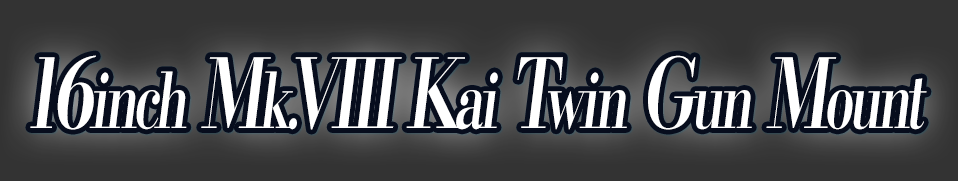
<style>
.page{position:relative;width:958px;height:181px;background:#333333}
.page>*{position:absolute;margin:0}
.t1{font:96px "KochoStd-Heavy";letter-spacing:-0.08em;color:#ffffff;font-style:italic;scale:0.7 1}
.t2{font:76.8px "KochoStd-Heavy";letter-spacing:-0.08em;color:#ffffff;font-style:italic;scale:0.7 1}
</style>
<div class="page">
<p class="t1" style="left:30px;top:55px;width:897px;height:75px">16<span class="t2">inch</span> M<span class="t2">k.</span>VIII K<span class="t2">ai</span> T<span class="t2">win</span> G<span class="t2">un</span> M<span class="t2">ount</span></p>
</div>
